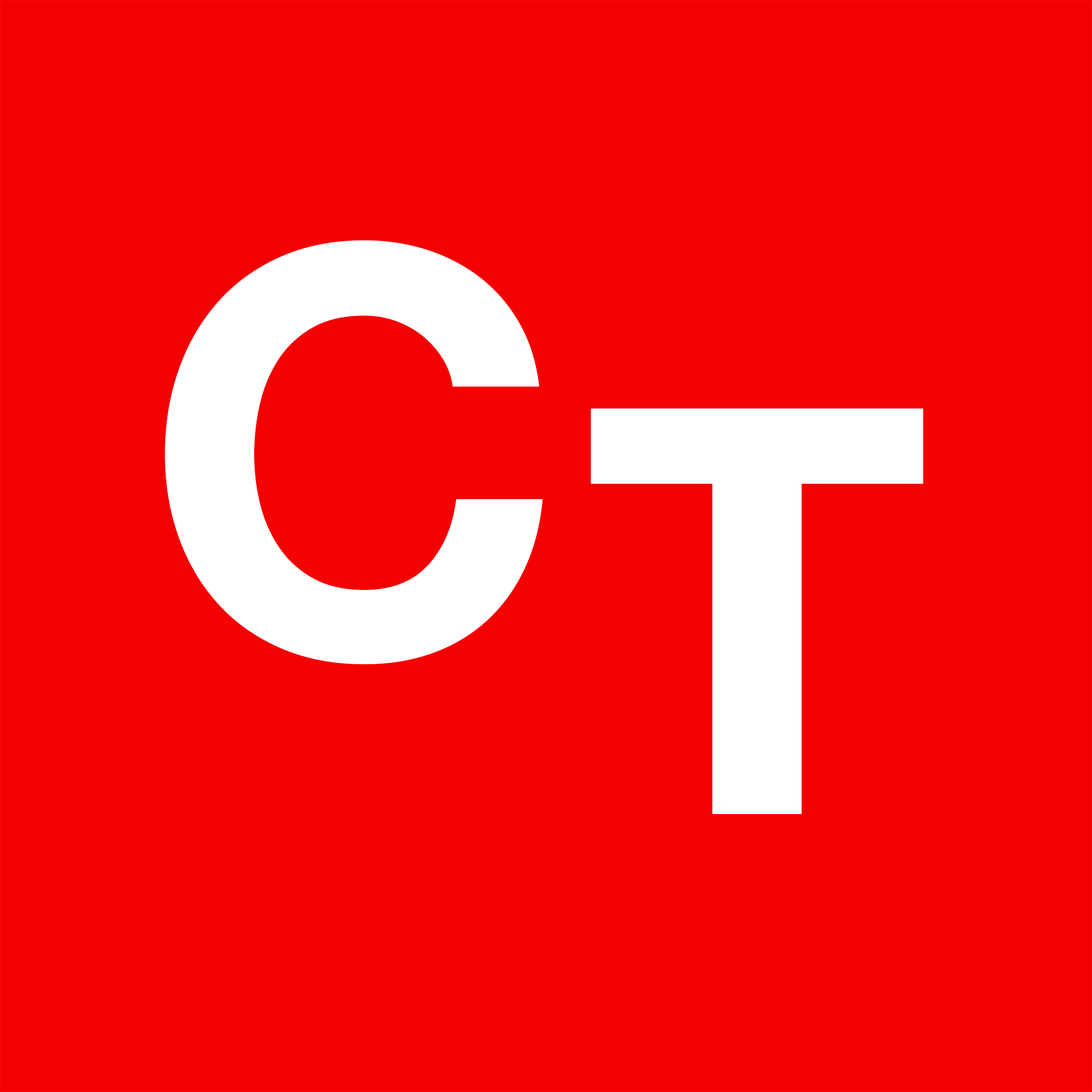
<style>
.page{position:relative;width:1092px;height:1092px;background:#f50000}
.page>*{position:absolute;margin:0}
.t1{font:567.9px "HelveticaNeue-Bold";color:#ffffff}
</style>
<div class="page">
<p class="t1" style="left:165px;top:240px;width:378px;height:424px">C</p>
<p class="t1" style="left:591px;top:409px;width:332px;height:405px">T</p>
</div>
